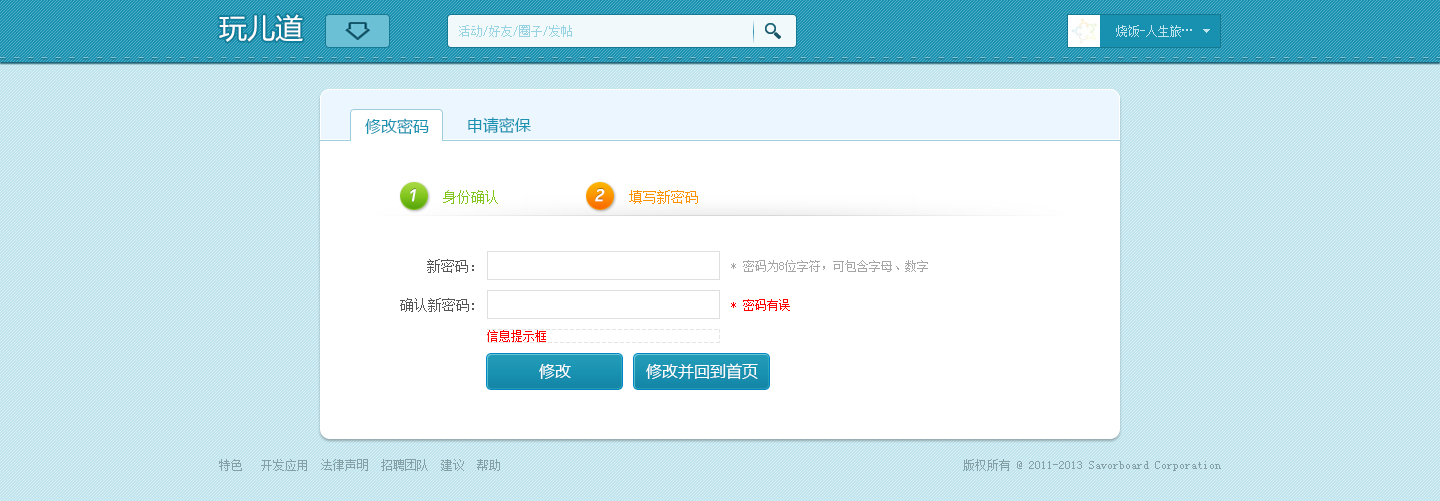
<style>
.page{position:relative;width:1440px;height:501px;background:#bfe4ed}
.page>*{position:absolute;margin:0}
.t1{font:28px "MicrosoftYaHei";color:#ffffff}
.t2{font:12px "SimSun";color:#98d3e4}
.t3{font:16px "MicrosoftYaHei";color:#1992b1}
.t4{font:19px "OCRB10PitchBT-Regular";color:#ffffff;font-style:italic}
.t5{font:14px "SimSun";color:#80c41c}
.t6{font:14px "SimSun";color:#fc9200}
.t7{font:14px "SimSun";color:#555555}
.t8{font:12px "SimSun";color:#a5a5a5}
.t9{font:12px "SimSun";color:#ff0000}
.t10{font:12px "SimSun";color:#ff0101}
.t11{font:16px "MicrosoftYaHei";color:#ffffff}
.t12{font:12px "SimSun";color:#849fa6}
</style>
<div class="page">
<p class="t1" style="left:219px;top:14px;width:84px;height:28px">玩儿道</p>
<p class="t2" style="left:459px;top:25px;width:113px;height:12px">活动/好友/圈子/发帖</p>
<p class="t3" style="left:365px;top:118px;width:64px;height:17px">修改密码</p>
<p class="t3" style="left:468px;top:117px;width:63px;height:16px">申请密保</p>
<p class="t4" style="left:410px;top:189px;width:6px;height:13px">1</p>
<p class="t5" style="left:443px;top:190px;width:55px;height:14px">身份确认</p>
<p class="t4" style="left:595px;top:189px;width:10px;height:13px">2</p>
<p class="t6" style="left:629px;top:190px;width:69px;height:14px">填写新密码</p>
<p class="t7" style="left:427px;top:259px;width:47px;height:14px">新密码：</p>
<p class="t8" style="left:731px;top:260px;width:197px;height:12px">* 密码为8位字符，可包含字母、数字</p>
<p class="t7" style="left:400px;top:298px;width:74px;height:14px">确认新密码:</p>
<p class="t9" style="left:731px;top:299px;width:59px;height:12px">* 密码有误</p>
<p class="t10" style="left:487px;top:330px;width:59px;height:12px">信息提示框</p>
<p class="t11" style="left:539px;top:364px;width:32px;height:15px">修改</p>
<p class="t11" style="left:646px;top:363px;width:112px;height:17px">修改并回到首页</p>
<p class="t12" style="left:219px;top:459px;width:281px;height:12px">特色   开发应用  法律声明  招聘团队  建议  帮助</p>
<p class="t12" style="left:963px;top:459px;width:258px;height:12px">版权所有 @ 2011-2013 Savorboard Corporation</p>
</div>
